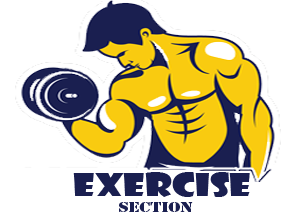
<style>
.page{position:relative;width:300px;height:216px;background:#ffffff}
.page>*{position:absolute;margin:0}
.t1{font:31.2px "ShowcardGothic-Reg";color:#1a1f50;scale:1.25 1}
.t2{font:13.3px "StencilStd";color:#1a1f50;scale:1.25 1}
</style>
<div class="page">
<p class="t1" style="left:73px;top:172px;width:177px;height:40px">Exercise<br><span class="t2"> Section</span></p>
</div>
